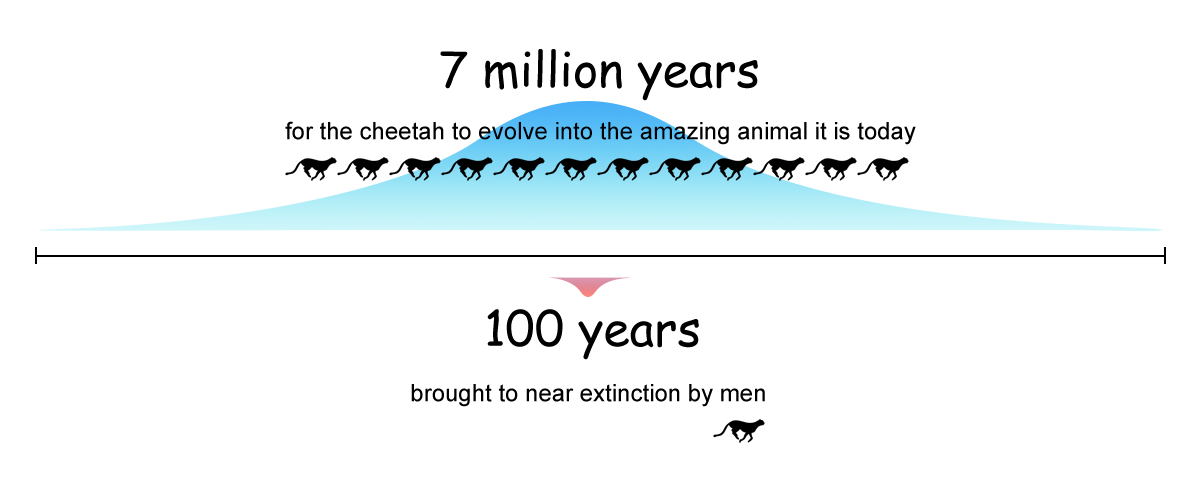
<style>
.page{position:relative;width:1200px;height:480px;background:#ffffff}
.page>*{position:absolute;margin:0}
.t1{font:48px "ComicSansMS";color:#000000}
.t2{font:24px "ArialMT";color:#000000}
</style>
<div class="page">
<p class="t1" style="left:440px;top:49px;width:318px;height:52px">7 million years</p>
<p class="t2" style="left:285px;top:121px;width:631px;height:24px">for the cheetah to evolve into the amazing animal it is today</p>
<p class="t1" style="left:487px;top:309px;width:212px;height:51px">100 years</p>
<p class="t2" style="left:411px;top:384px;width:354px;height:23px">brought to near extinction by men</p>
</div>
